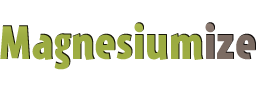
<style>
.page{position:relative;width:256px;height:91px;background:#ffffff}
.page>*{position:absolute;margin:0}
.t1{font:50px "Santana-BlackCondensed";color:#a0af44}
.t2{font:50px "Santana-BlackCondensed";color:#7f6f66}
</style>
<div class="page">
<p class="t1" style="left:0px;top:22px;width:256px;height:48px">Magnesium<span class="t2">ize</span></p>
</div>
